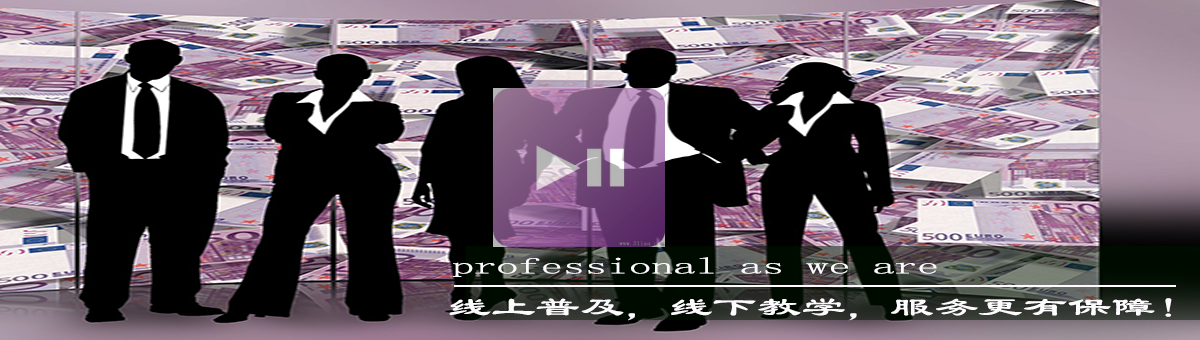
<style>
.page{position:relative;width:1200px;height:340px;background:#000000}
.page>*{position:absolute;margin:0}
.t1{font:23px "LiSu";color:#fefbff;scale:1.92 1}
.t2{font:26.2px "LiSu";color:#fefbff;scale:1.69 1}
</style>
<div class="page">
<p class="t1" style="left:453px;top:257px;width:484px;height:20px">professional as we are</p>
<p class="t2" style="left:449px;top:298px;width:723px;height:23px">线上普及，线下教学，服务更有保障！</p>
</div>
